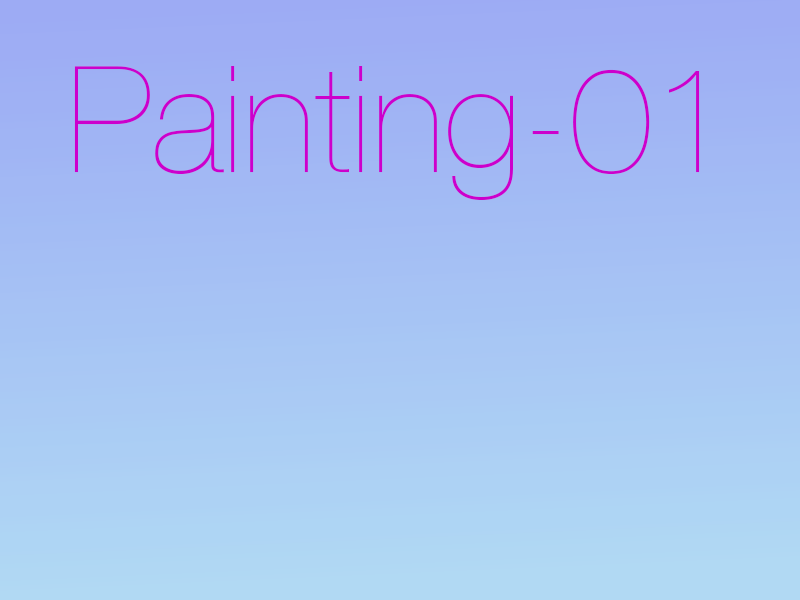
<style>
.page{position:relative;width:800px;height:600px}
.page>*{position:absolute;margin:0}
.t1{font:147.5px "HelveticaNeue-UltraLight";color:#cc00cc}
</style>
<div class="page">
<p class="t1" style="left:74px;top:66px;width:626px;height:134px">Painting-01</p>
</div>
